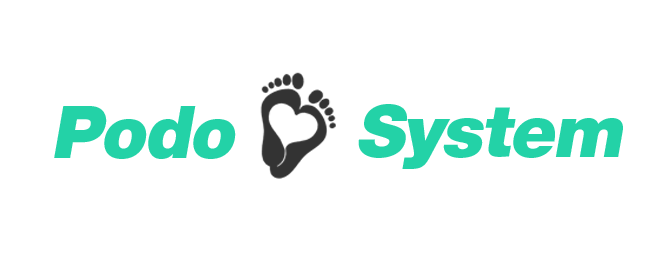
<style>
.page{position:relative;width:671px;height:264px;background:#ffffff}
.page>*{position:absolute;margin:0}
.t1{font:72.6px "HelveticaNeueCE-Black";letter-spacing:-0.025em;color:#23d2a7;font-style:italic}
</style>
<div class="page">
<p class="t1" style="left:54px;top:106px;width:182px;height:53px">Podo</p>
<p class="t1" style="left:358px;top:104px;width:265px;height:65px">System</p>
</div>
